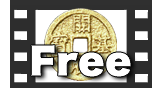
<style>
.page{position:relative;width:160px;height:94px;background:#ffffff}
.page>*{position:absolute;margin:0}
.t1{font:35.9px "HiraginoSans-W9";color:#ffffff;font-weight:bold}
</style>
<div class="page">
<p class="t1" style="left:31px;top:44px;width:100px;height:33px">Free</p>
</div>
